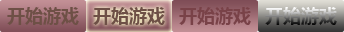
<style>
.page{position:relative;width:344px;height:32px}
.page>*{position:absolute;margin:0}
.t1{font:18px "MicrosoftYaHei";color:#6e5046}
</style>
<div class="page">
<p class="t1" style="left:7px;top:7px;width:72px;height:18px">开始游戏</p>
<p class="t1" style="left:93px;top:7px;width:72px;height:18px">开始游戏</p>
<p class="t1" style="left:179px;top:7px;width:72px;height:18px">开始游戏</p>
</div>
